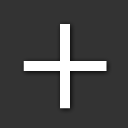
<style>
.page{position:relative;width:128px;height:128px;background:#333333}
.page>*{position:absolute;margin:0}
.t1{font:172.8px "Cimbrian";color:#ffffff}
</style>
<div class="page">
<p class="t1" style="left:23px;top:24px;width:84px;height:85px">+</p>
</div>
